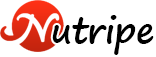
<style>
.page{position:relative;width:156px;height:57px;background:#ffffff}
.page>*{position:absolute;margin:0}
.t1{font:35px "SegoePrint-Bold";letter-spacing:-0.02em;color:#000000}
</style>
<div class="page">
<p class="t1" style="left:52px;top:15px;width:102px;height:40px">utripe</p>
</div>
